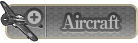
<style>
.page{position:relative;width:138px;height:43px}
.page>*{position:absolute;margin:0}
.t1{font:18px "RyuminPro-ExBold";letter-spacing:-0.08em;color:#b8b8b8;scale:0.9 1}
</style>
<div class="page">
<p class="t1" style="left:62px;top:15px;width:58px;height:14px">Aircraft</p>
</div>
